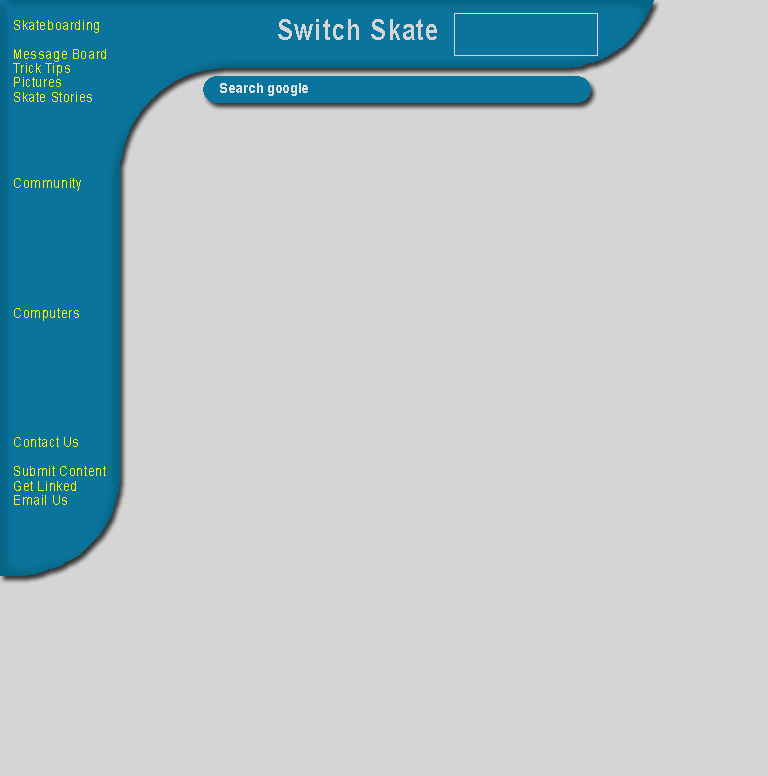
<style>
.page{position:relative;width:768px;height:776px;background:#d5d5d5}
.page>*{position:absolute;margin:0}
.t1{font:14.4px "ArialMT";letter-spacing:0.05em;color:#fff000;scale:0.83 1}
.t2{font:28.8px "Arial-BoldMT";letter-spacing:0.05em;color:#d5d5d5;scale:0.83 1}
.t3{font:14.4px "Arial-BoldMT";letter-spacing:0.05em;color:#e3e3e3;scale:0.83 1}
</style>
<div class="page">
<p class="t1" style="left:13px;top:20px;width:93px;height:485px">Skateboarding<br><br>Message Board<br>Trick Tips<br>Pictures<br>Skate Stories<br><br><br><br><br><br>Community<br><br><br><br><br><br><br><br><br>Computers<br><br><br><br><br><br><br><br><br>Contact Us<br><br>Submit Content<br>Get Linked<br>Email Us</p>
<p class="t2" style="left:278px;top:19px;width:159px;height:21px">Switch Skate</p>
<p class="t3" style="left:220px;top:83px;width:88px;height:13px">Search google</p>
</div>
